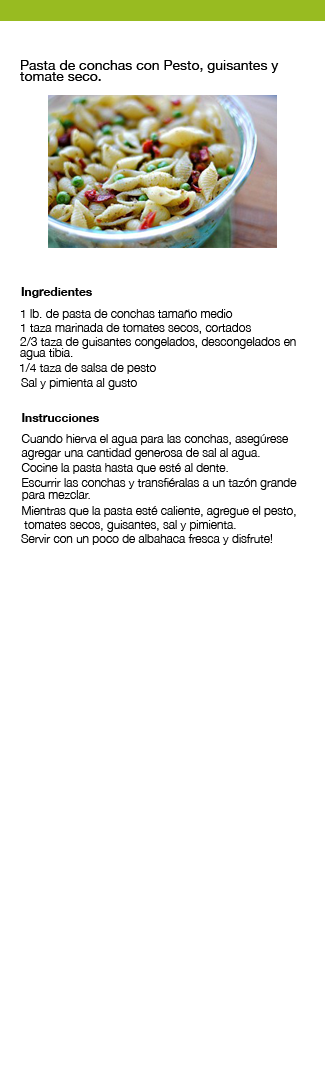
<style>
.page{position:relative;width:325px;height:1068px;background:#ffffff}
.page>*{position:absolute;margin:0}
.t1{font:14px "HelveticaNeue";color:#000000}
.t2{font:12px "HelveticaNeue-Bold";color:#000000}
.t3{font:12px "HelveticaNeue-Light";color:#000000}
</style>
<div class="page">
<p class="t1" style="left:21px;top:60px;width:258px;height:13px">Pasta de conchas con Pesto, guisantes y</p>
<p class="t1" style="left:20px;top:72px;width:81px;height:9px">tomate seco.</p>
<p class="t2" style="left:21px;top:287px;width:71px;height:11px">Ingredientes</p>
<p class="t3" style="left:21px;top:309px;width:212px;height:11px">1 lb. de pasta de conchas tamaño medio</p>
<p class="t3" style="left:21px;top:323px;width:230px;height:11px">1 taza marinada de tomates secos, cortados</p>
<p class="t3" style="left:20px;top:337px;width:276px;height:12px">2/3 taza de guisantes congelados, descongelados en</p>
<p class="t3" style="left:20px;top:348px;width:53px;height:12px">agua tibia.</p>
<p class="t3" style="left:20px;top:363px;width:136px;height:11px">1/4 taza de salsa de pesto</p>
<p class="t3" style="left:21px;top:378px;width:116px;height:12px">Sal y pimienta al gusto</p>
<p class="t2" style="left:22px;top:413px;width:77px;height:9px">Instrucciones</p>
<p class="t3" style="left:21px;top:434px;width:267px;height:12px">Cuando hierva el agua para las conchas, asegúrese</p>
<p class="t3" style="left:21px;top:448px;width:239px;height:12px">agregar una cantidad generosa de sal al agua.</p>
<p class="t3" style="left:21px;top:463px;width:207px;height:11px">Cocine la pasta hasta que esté al dente.</p>
<p class="t3" style="left:22px;top:478px;width:275px;height:12px">Escurrir las conchas y transfiéralas a un tazón grande</p>
<p class="t3" style="left:22px;top:490px;width:68px;height:11px">para mezclar.</p>
<p class="t3" style="left:22px;top:506px;width:274px;height:12px">Mientras que la pasta esté caliente, agregue el pesto,</p>
<p class="t3" style="left:24px;top:520px;width:212px;height:12px">tomates secos, guisantes, sal y pimienta.</p>
<p class="t3" style="left:21px;top:534px;width:251px;height:11px">Servir con un poco de albahaca fresca y disfrute!</p>
</div>
